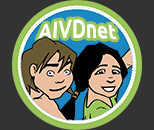
<style>
.page{position:relative;width:154px;height:130px;background:#333333}
.page>*{position:absolute;margin:0}
.t1{font:18.9px "Ubuntu-Bold";color:#ffffff}
</style>
<div class="page">
<p class="t1" style="left:37px;top:19px;width:80px;height:21px">AIVDnet</p>
</div>
